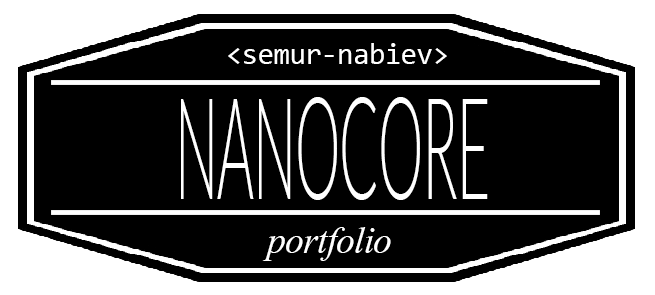
<style>
.page{position:relative;width:655px;height:295px;background:#000000}
.page>*{position:absolute;margin:0}
.t1{font:30px "Consolas";letter-spacing:-0.02em;color:#ffffff}
.t2{font:142px "Lato-Light";letter-spacing:-0.02em;color:#ffffff;text-transform:uppercase;scale:0.4 1}
.t3{font:47px "Aparajita-Italic";letter-spacing:-0.02em;color:#ffffff}
</style>
<div class="page">
<p class="t1" style="left:228px;top:43px;width:219px;height:21px">&lt;semur-nabiev&gt;</p>
<p class="t2" style="left:181px;top:97px;width:307px;height:103px">nanocore</p>
<p class="t3" style="left:262px;top:227px;width:129px;height:34px">portfolio</p>
</div>
